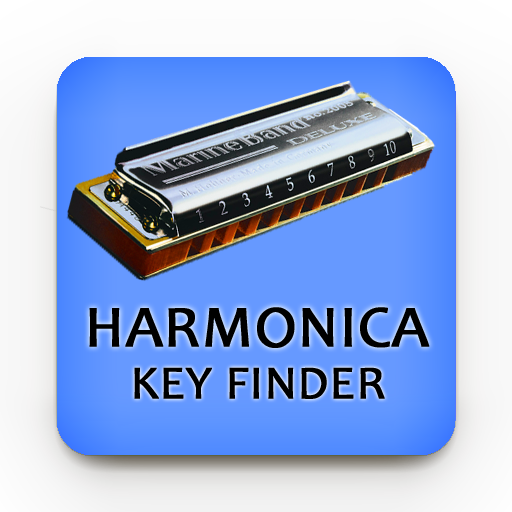
<style>
.page{position:relative;width:512px;height:512px}
.page>*{position:absolute;margin:0}
.t1{font:59.8px "Candara";color:#000000;font-weight:bold}
.t2{font:47.8px "Candara";color:#000000;font-weight:bold}
</style>
<div class="page">
<p class="t1" style="left:89px;top:307px;width:341px;height:41px">HARMONICA</p>
<p class="t2" style="left:134px;top:367px;width:251px;height:32px">KEY FINDER</p>
</div>
